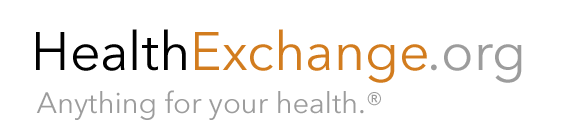
<style>
.page{position:relative;width:568px;height:135px;background:#ffffff}
.page>*{position:absolute;margin:0}
.t1{font:53.5px "AvenirNext-Regular";color:#d27c1e}
.t2{font:53.5px "AvenirNext-Regular";color:#000000}
.t3{font:53.5px "AvenirNext-Regular";color:#9c9c9c}
.t4{font:29.2px "AvenirNext-Regular";color:#9c9c9c}
</style>
<div class="page">
<p class="t1" style="left:36px;top:29px;width:486px;height:54px"><span class="t2">Health</span>Exchange<span class="t3">.org</span></p>
<p class="t4" style="left:36px;top:90px;width:345px;height:30px">Anything for your health.®</p>
</div>
